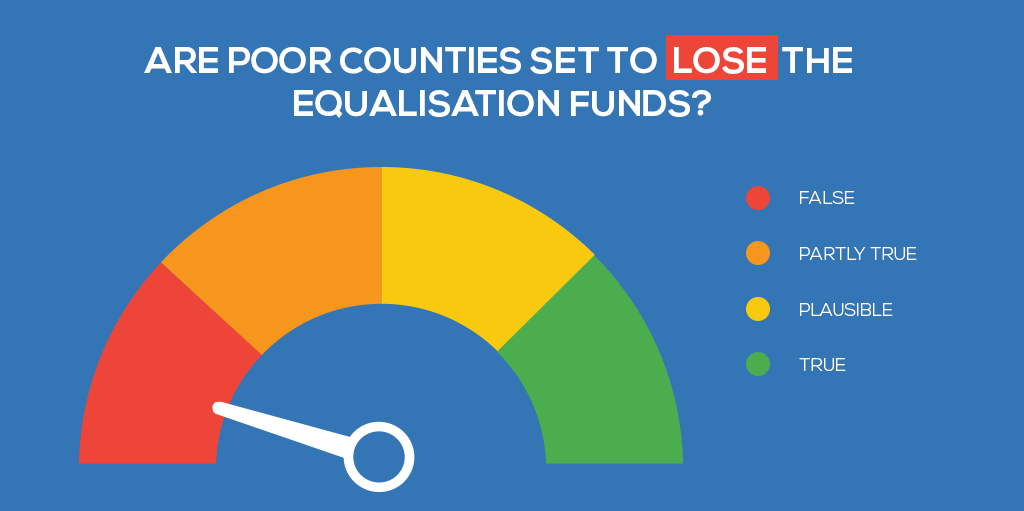
<style>
.page{position:relative;width:1024px;height:511px;background:#3375b5}
.page>*{position:absolute;margin:0}
.t1{font:36px "NexaBold";color:#ffffff;text-transform:uppercase}
.t2{font:18px "NexaLight";color:#ffffff;text-transform:uppercase}
</style>
<div class="page">
<p class="t1" style="left:144px;top:47px;width:708px;height:71px;text-align:center">are poor counties set to  lose  the <br>equalisation funds?</p>
<p class="t2" style="left:800px;top:191px;width:55px;height:13px">false</p>
<p class="t2" style="left:800px;top:247px;width:117px;height:13px">partly true</p>
<p class="t2" style="left:800px;top:303px;width:93px;height:13px">plausible</p>
<p class="t2" style="left:799px;top:358px;width:47px;height:13px">True</p>
</div>
